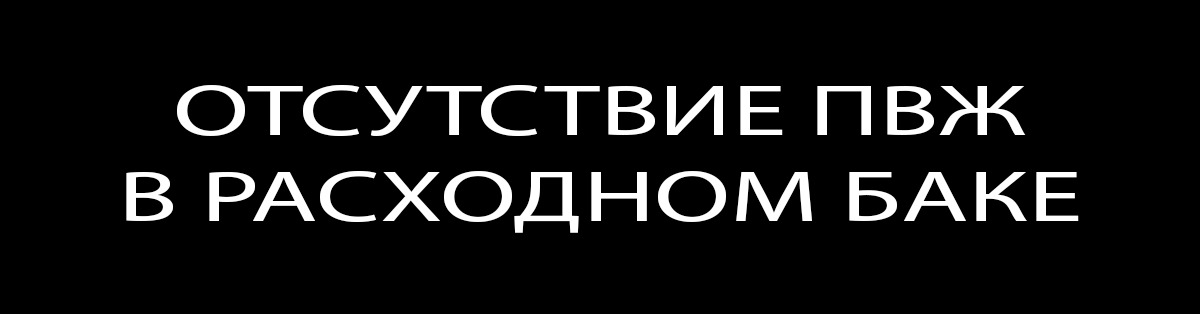
<style>
.page{position:relative;width:1200px;height:314px;background:#000000}
.page>*{position:absolute;margin:0}
.t1{font:72px "MyriadPro-Regular";color:#ffffff;scale:1.53 1}
</style>
<div class="page">
<p class="t1" style="left:126px;top:85px;width:953px;height:148px;text-align:center">ОТСУТСТВИЕ ПВЖ<br>В РАСХОДНОМ БАКЕ</p>
</div>
